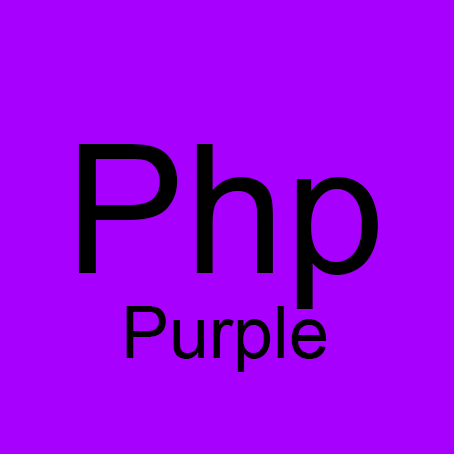
<style>
.page{position:relative;width:454px;height:454px;background:#a800ff}
.page>*{position:absolute;margin:0}
.t1{font:180px "ArialMT";color:#000000}
.t2{font:72px "ArialMT";color:#000000}
</style>
<div class="page">
<p class="t1" style="left:78px;top:144px;width:300px;height:165px">Php</p>
<p class="t2" style="left:126px;top:306px;width:201px;height:66px">Purple</p>
</div>
